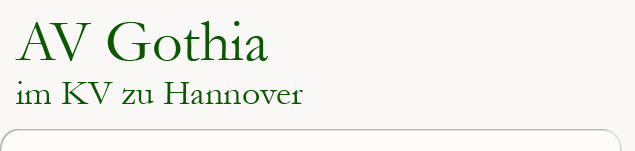
<style>
.page{position:relative;width:635px;height:151px;background:#faf8f6}
.page>*{position:absolute;margin:0}
.t1{font:36px "Garamond";color:#0b5803}
.t2{font:60px "Garamond";color:#0b5803}
</style>
<div class="page">
<p class="t1" style="left:15px;top:21px;width:288px;height:83px"><span class="t2">AV Gothia<br></span>im KV zu Hannover</p>
</div>
